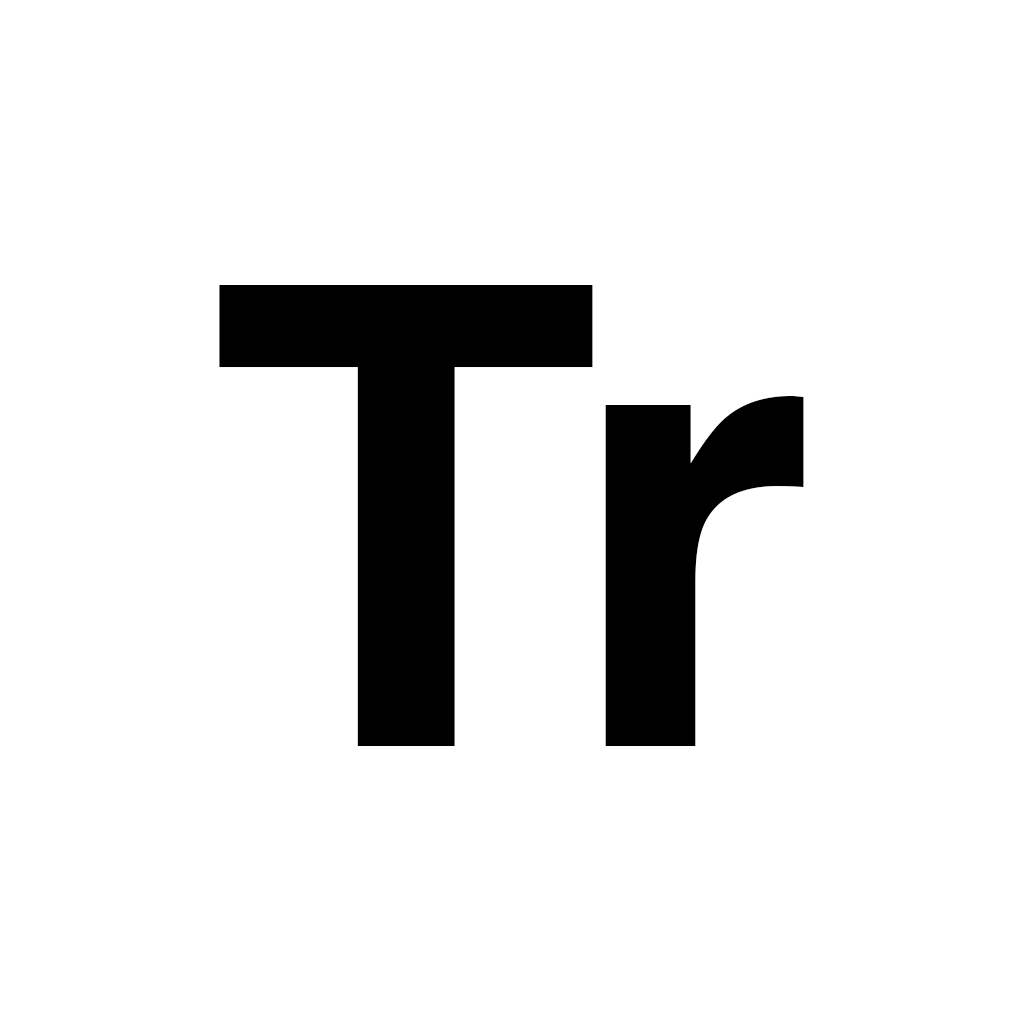
<style>
.page{position:relative;width:1024px;height:1024px;background:#ffffff}
.page>*{position:absolute;margin:0}
.t1{font:640px "Helvetica-Bold";color:#000000}
</style>
<div class="page">
<p class="t1" style="left:219px;top:285px;width:585px;height:461px">Tr</p>
</div>
